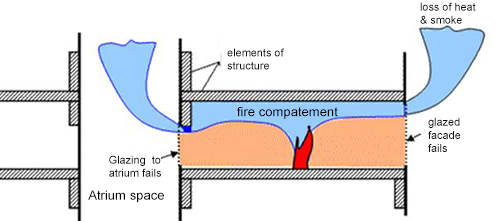
<style>
.page{position:relative;width:500px;height:221px;background:#ffffff}
.page>*{position:absolute;margin:0}
.t1{font:10.9px "ArialMT";color:#0c0c0c}
.t2{font:9.8px "ArialMT";color:#000000}
</style>
<div class="page">
<p class="t1" style="left:420px;top:2px;width:56px;height:22px">loss of heat<br>&amp; smoke</p>
<p class="t1" style="left:227px;top:48px;width:57px;height:22px">elements of<br>structure</p>
<p class="t2" style="left:237px;top:107px;width:101px;height:12px">fire compatement</p>
<p class="t1" style="left:428px;top:117px;width:33px;height:35px">glazed <br>facade<br>fails</p>
<p class="t1" style="left:109px;top:155px;width:52px;height:22px">Glazing  to<br>atrium fails</p>
<p class="t2" style="left:88px;top:190px;width:76px;height:13px">Atrium space</p>
</div>
